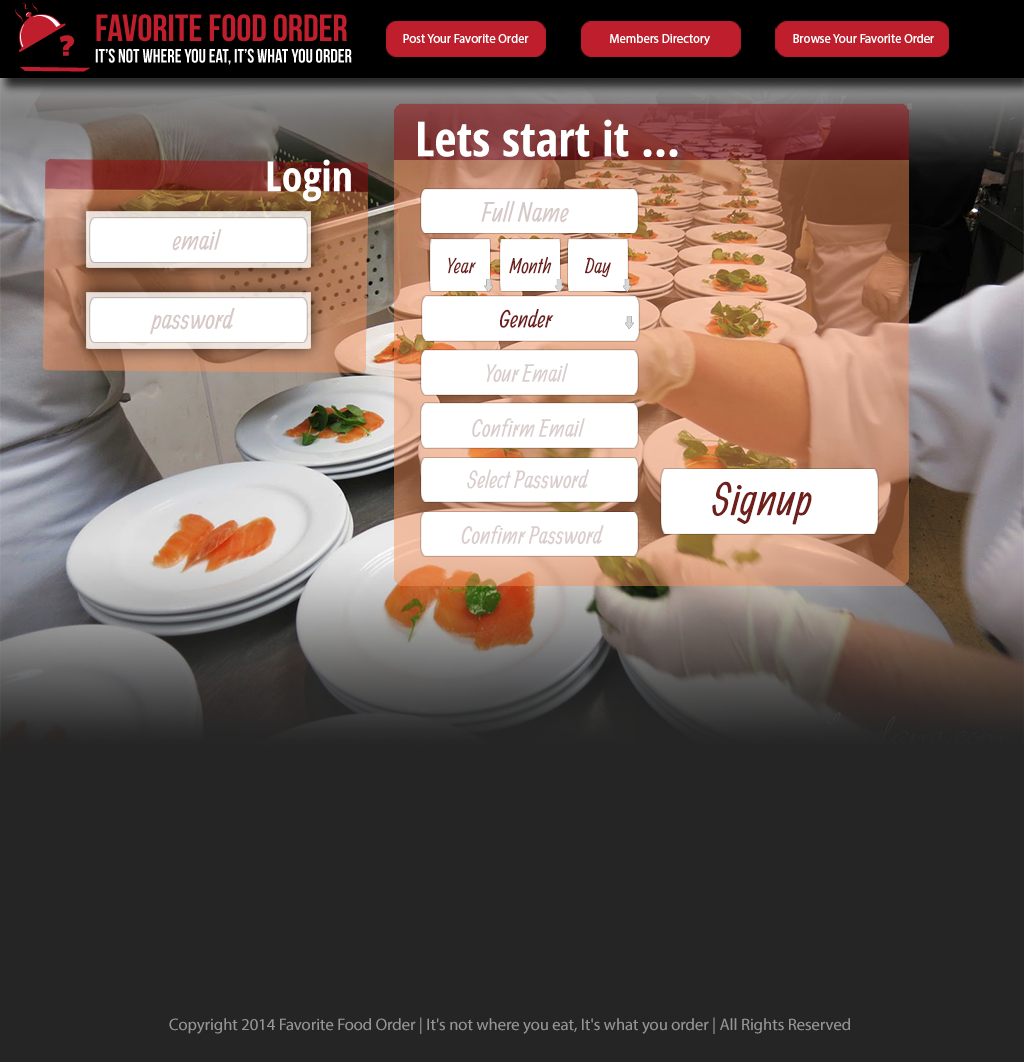
<style>
.page{position:relative;width:1024px;height:1062px;background:#252525}
.page>*{position:absolute;margin:0}
.t1{font:12.7px "MyriadPro-Regular";color:#ffffff}
.t2{font:48.2px "OpenSans-CondensedBold";color:#ffffff}
.t3{font:41.8px "OpenSans-CondensedBold";color:#ffffff}
.t4{font:27.2px "Allan-Regular";color:#d7c9c8}
.t5{font:21.3px "Allan-Regular";color:#711f1d}
.t6{font:24.1px "Allan-Regular";color:#711f1d}
.t7{font:24.1px "Allan-Regular";color:#dacdcd}
.t8{font:45.6px "Allan-Regular";color:#711f1d}
.t9{font:16.6px "MyriadPro-Regular";color:#959595}
</style>
<div class="page">
<p class="t1" style="left:403px;top:34px;width:126px;height:9px">Post Your Favorite Order</p>
<p class="t1" style="left:610px;top:34px;width:100px;height:12px">Members Directory</p>
<p class="t1" style="left:793px;top:34px;width:141px;height:9px">Browse Your Favorite Order</p>
<p class="t2" style="left:418px;top:119px;width:260px;height:38px">Lets start it ...</p>
<p class="t3" style="left:267px;top:159px;width:84px;height:43px">Login</p>
<p class="t4" style="left:481px;top:201px;width:88px;height:22px">Full Name</p>
<p class="t4" style="left:172px;top:229px;width:50px;height:22px">email</p>
<p class="t5" style="left:448px;top:257px;width:28px;height:17px">Year</p>
<p class="t5" style="left:509px;top:257px;width:43px;height:17px">Month</p>
<p class="t5" style="left:585px;top:257px;width:26px;height:21px">Day</p>
<p class="t4" style="left:150px;top:308px;width:85px;height:27px">password</p>
<p class="t6" style="left:500px;top:309px;width:54px;height:19px">Gender</p>
<p class="t7" style="left:486px;top:363px;width:82px;height:19px">Your Email</p>
<p class="t7" style="left:472px;top:418px;width:113px;height:19px">Confirm Email</p>
<p class="t7" style="left:467px;top:469px;width:122px;height:20px">Select Password</p>
<p class="t8" style="left:712px;top:481px;width:100px;height:44px">Signup</p>
<p class="t7" style="left:461px;top:525px;width:143px;height:20px">Confimr Password</p>
<p class="t9" style="left:169px;top:1017px;width:681px;height:17px">Copyright 2014 Favorite Food Order | It's not where you eat, It's what you order | All Rights Reserved</p>
</div>
